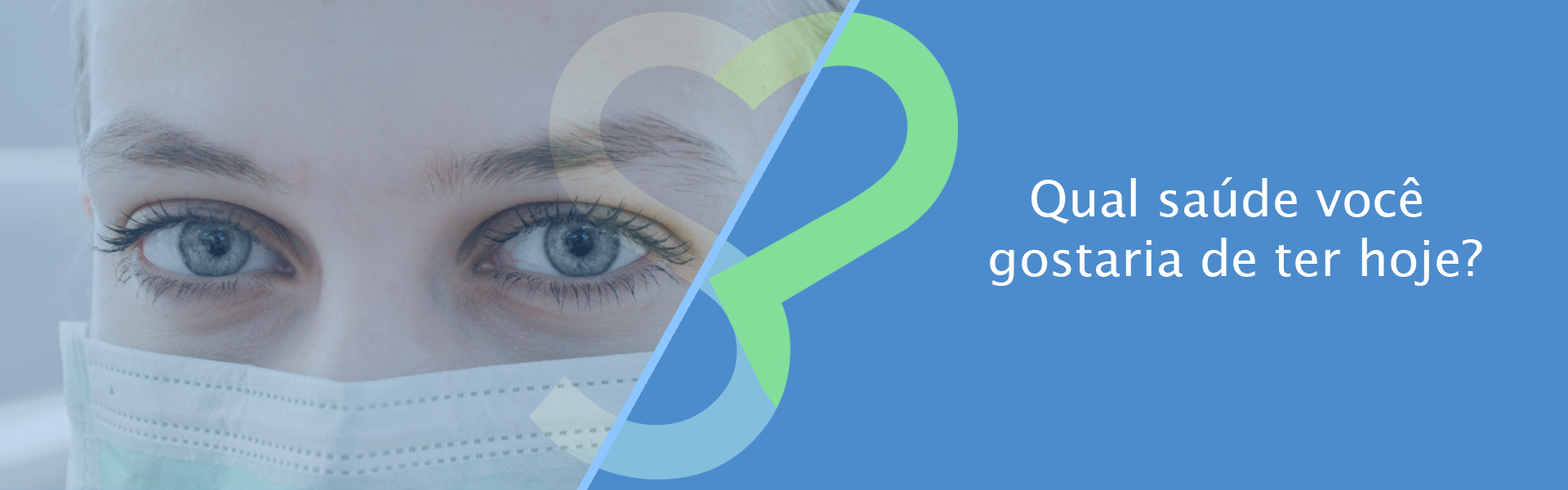
<style>
.page{position:relative;width:1568px;height:490px;background:#4c8ccc}
.page>*{position:absolute;margin:0}
.t1{font:49.9px "LucidaSansUnicode";color:#ffffff}
</style>
<div class="page">
<p class="t1" style="left:990px;top:177px;width:492px;height:109px;text-align:center">Qual saúde você <br>gostaria de ter hoje?</p>
</div>
